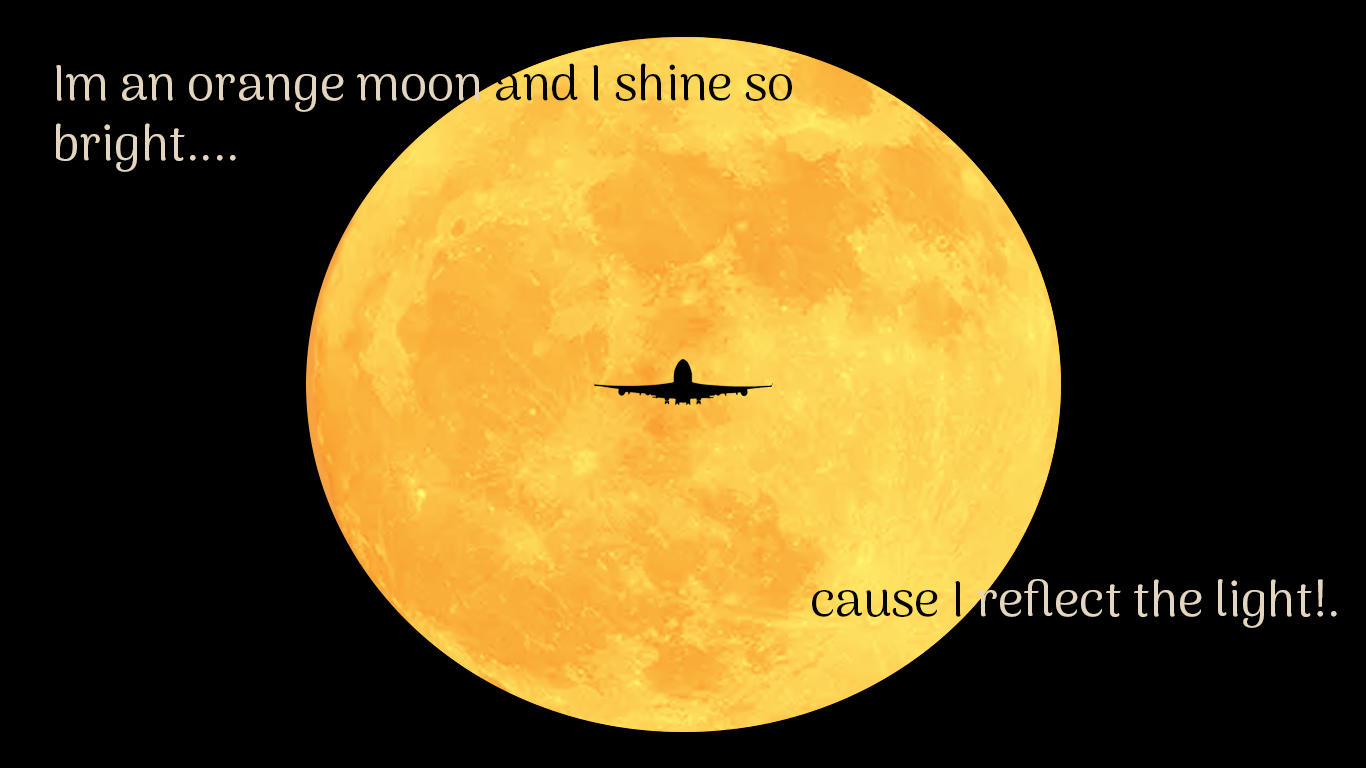
<style>
.page{position:relative;width:1366px;height:768px;background:#000000}
.page>*{position:absolute;margin:0}
.t1{font:50px "ArimaMadurai-Regular";color:#e4d6be}
.t2{font:50px "ArimaMadurai-Regular";color:#030303}
.t3{font:50px "ArimaMadurai-Regular";color:#020202}
</style>
<div class="page">
<p class="t1" style="left:56px;top:63px;width:736px;height:109px">Im an orange moon <span class="t2">and I shine so <br></span>bright....</p>
<p class="t1" style="left:812px;top:579px;width:525px;height:49px"><span class="t3">cause I </span>reflect the light!.</p>
</div>
